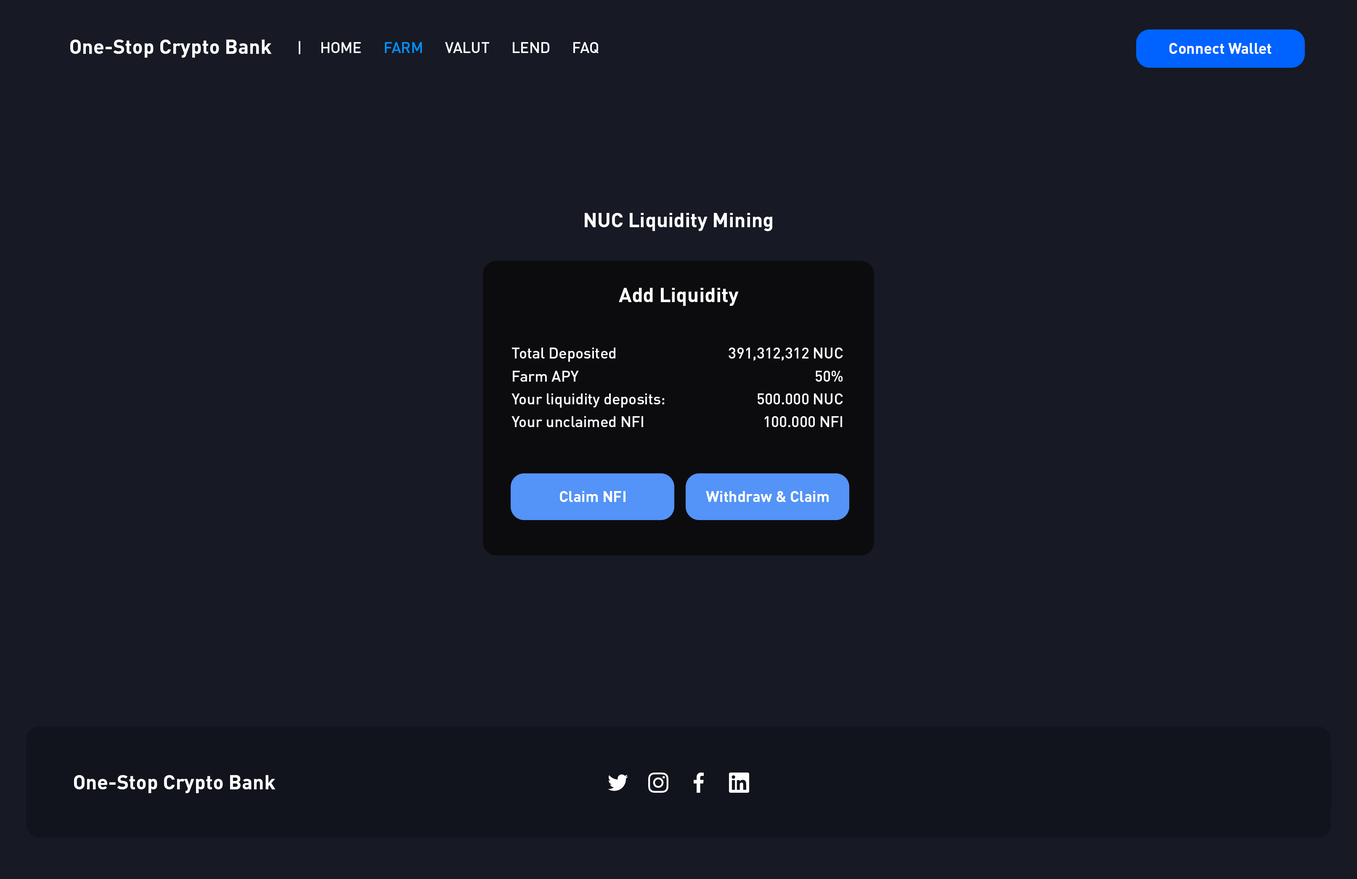
<style>
.page{position:relative;width:1357px;height:879px;background:#171924}
.page>*{position:absolute;margin:0}
.t1{font:20.2px "DIN-Bold";color:#ffffff}
.t2{font:15.1px "DIN-Medium";color:#ffffff}
.t3{font:15.1px "DIN-Medium";color:#0091ff}
.t4{font:15.1px "DIN-Bold";color:#ffffff}
.t5{font:15.1px/22.8px "DIN-Medium";color:#ffffff}
</style>
<div class="page">
<p class="t1" style="left:70px;top:40px;width:202px;height:18px">One-Stop Crypto Bank</p>
<p class="t2" style="left:299px;top:41px;width:300px;height:13px">|     HOME      <span class="t3">FARM</span>      VALUT      LEND      FAQ</p>
<p class="t4" style="left:1169px;top:43px;width:102px;height:11px">Connect Wallet</p>
<p class="t1" style="left:585px;top:213px;width:187px;height:18px">NUC Liquidity Mining</p>
<p class="t1" style="left:619px;top:288px;width:120px;height:18px">Add Liquidity</p>
<p class="t5" style="left:512px;top:347px;width:152px;height:80px">Total Deposited<br>Farm APY<br>Your liquidity deposits:<br>Your unclaimed NFI</p>
<p class="t5" style="left:729px;top:347px;width:114px;height:80px;text-align:right">391,312,312 NUC<br>50%<br>500.000 NUC<br>100.000 NFI</p>
<p class="t4" style="left:560px;top:491px;width:65px;height:11px">Claim NFI</p>
<p class="t4" style="left:706px;top:491px;width:123px;height:11px">Withdraw &amp; Claim</p>
<p class="t1" style="left:74px;top:775px;width:202px;height:18px">One-Stop Crypto Bank</p>
</div>
